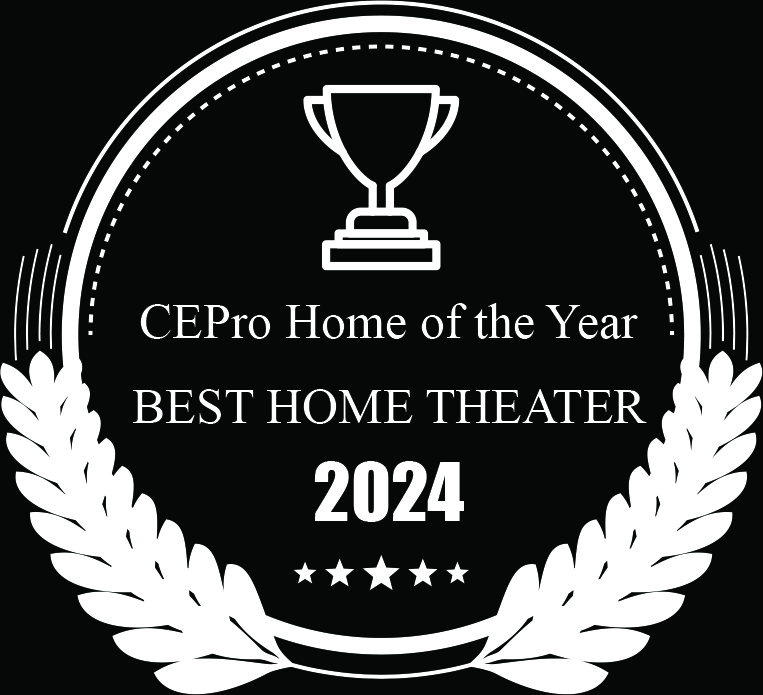
<style>
.page{position:relative;width:763px;height:695px;background:#060808}
.page>*{position:absolute;margin:0}
.t1{font:50px "TimesNewRomanPSMT";color:#ffffff}
.t2{font:75px "Impact";color:#ffffff}
</style>
<div class="page">
<p class="t1" style="left:140px;top:303px;width:498px;height:36px">CEPro Home of the Year</p>
<p class="t1" style="left:132px;top:389px;width:515px;height:35px">BEST HOME THEATER</p>
<p class="t2" style="left:314px;top:461px;width:150px;height:61px">2024</p>
</div>
